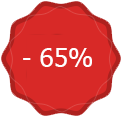
<style>
.page{position:relative;width:123px;height:119px;background:#d82927}
.page>*{position:absolute;margin:0}
.t1{font:26px "Tahoma";color:#ffffff}
</style>
<div class="page">
<p class="t1" style="left:23px;top:48px;width:69px;height:19px">- 65%</p>
</div>
